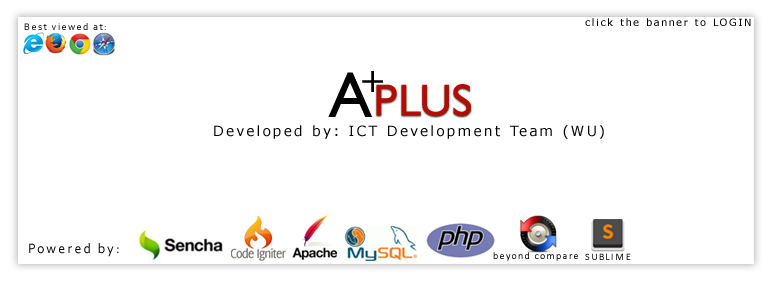
<style>
.page{position:relative;width:775px;height:286px;background:#ffffff}
.page>*{position:absolute;margin:0}
.t1{font:10px "Corbel";letter-spacing:0.15em}
.t2{font:10px "Verdana";letter-spacing:0.15em;color:#000000}
.t3{font:65.1px "Humanist521BT-Roman";color:#000000}
.t4{font:35.1px "Humanist521BT-Roman";color:#000000}
.t5{font:45px "Humanist521BT-Roman";color:#b40c00}
.t6{font:45px "Humanist521BT-Roman";color:#000000}
.t7{font:14px "Verdana";letter-spacing:0.15em;color:#000000}
.t8{font:14px "Corbel";letter-spacing:0.15em;color:#000000}
.t9{font:10px "Calibri";letter-spacing:0.15em}
</style>
<div class="page">
<p class="t1" style="left:24px;top:23px;width:82px;height:7px">Best viewed at:</p>
<p class="t2" style="left:585px;top:18px;width:166px;height:8px">click the banner to LOGIN</p>
<p class="t3" style="left:328px;top:72px;width:45px;height:45px">A</p>
<p class="t4" style="left:362px;top:71px;width:21px;height:21px">+</p>
<p class="t5" style="left:376px;top:84px;width:95px;height:33px"><span class="t6">    </span>PLUS</p>
<p class="t7" style="left:214px;top:125px;width:390px;height:14px">Developed by: ICT Development Team (WU)</p>
<p class="t8" style="left:29px;top:243px;width:90px;height:14px">Powered by:</p>
<p class="t9" style="left:493px;top:252px;width:85px;height:9px">beyond compare</p>
<p class="t9" style="left:585px;top:253px;width:46px;height:7px">SUBLIME</p>
</div>
